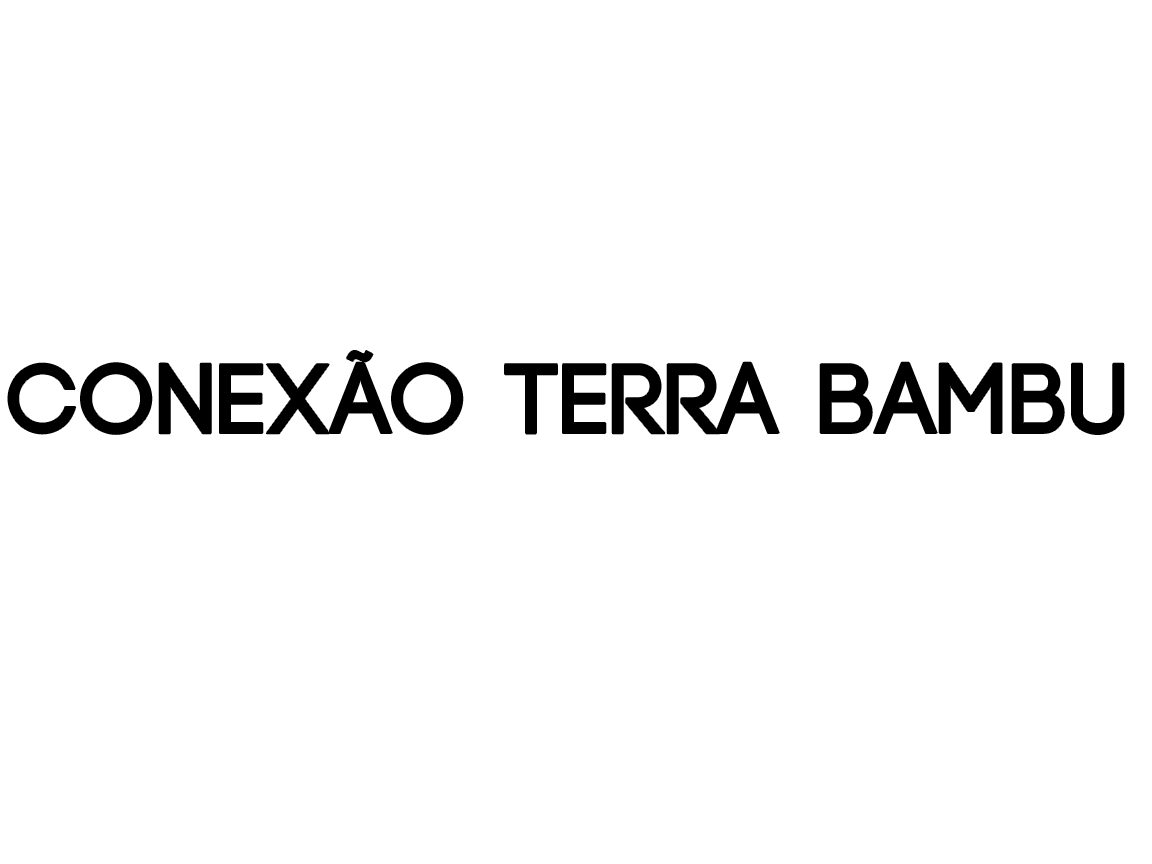
<style>
.page{position:relative;width:1152px;height:864px;background:#ffffff}
.page>*{position:absolute;margin:0}
.t1{font:98.5px "Code-Bold";letter-spacing:0.025em;color:#000000}
</style>
<div class="page">
<p class="t1" style="left:8px;top:351px;width:1116px;height:83px">CONEXÃO TERRA BAMBU</p>
</div>
